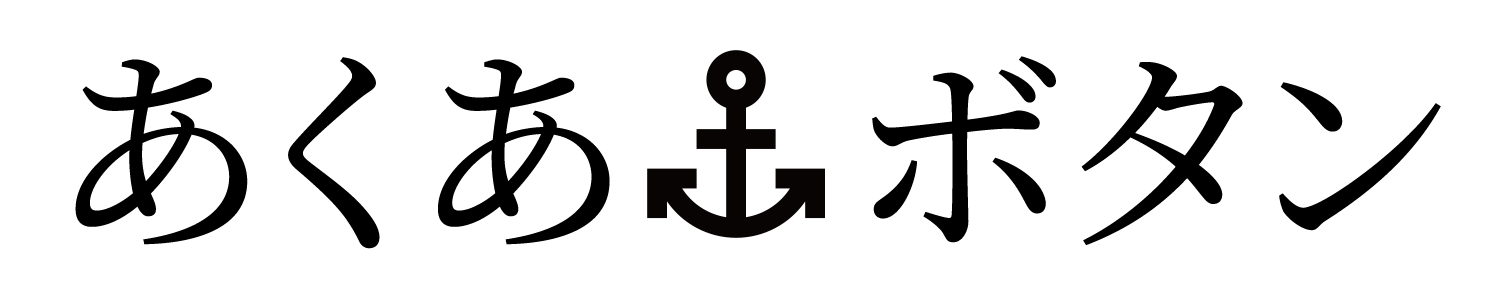
<style>
.page{position:relative;width:1500px;height:300px;background:#ffffff}
.page>*{position:absolute;margin:0}
.t1{font:220px "SourceHanSerifSC-Medium";color:#000000}
</style>
<div class="page">
<p class="t1" style="left:75px;top:56px;width:1366px;height:193px">あくあ    ボタン</p>
</div>
